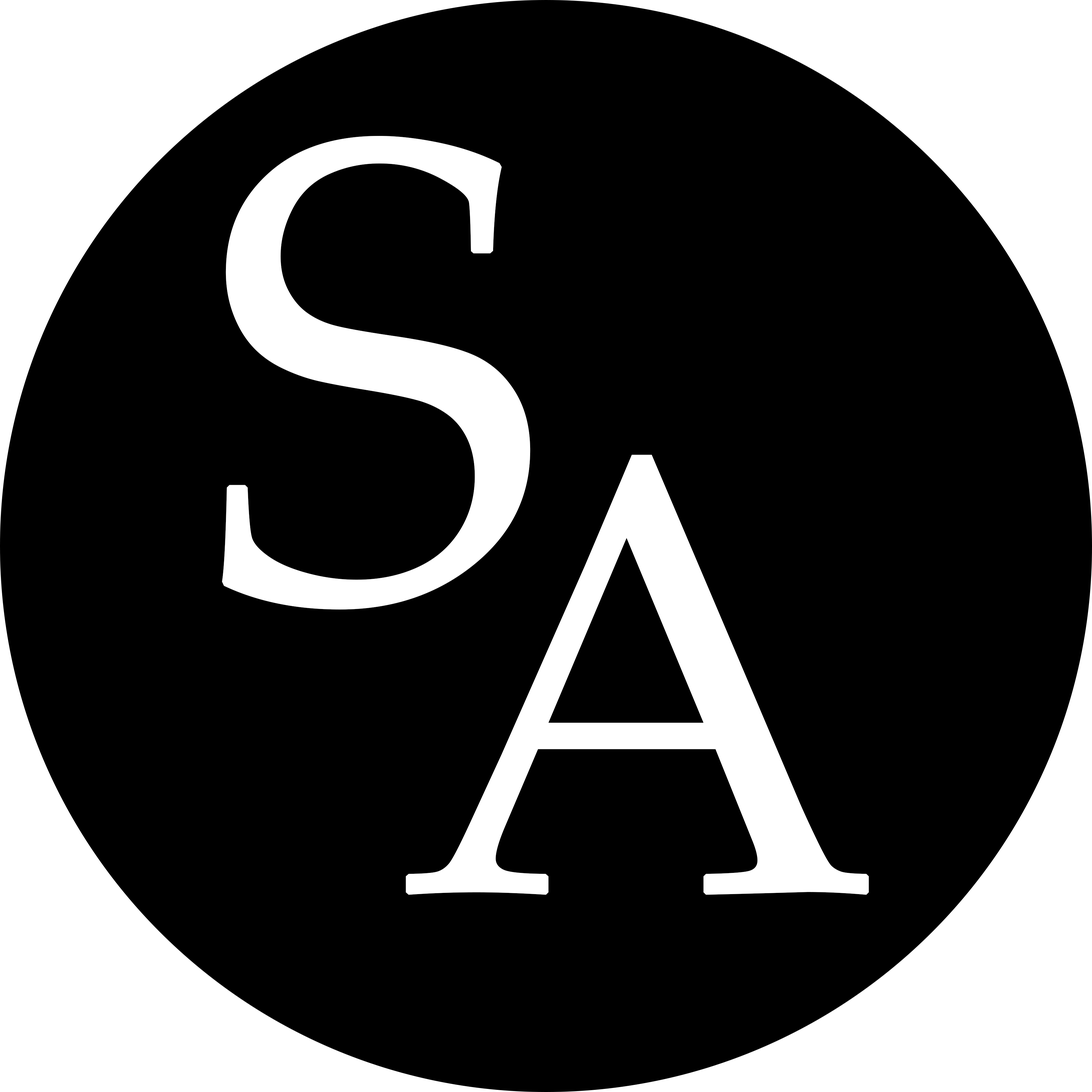
<style>
.page{position:relative;width:1092px;height:1092px;background:#000000}
.page>*{position:absolute;margin:0}
.t1{font:655.2px "PalatinoLinotype-Roman";color:#ffffff}
.t2{font:627.9px "PalatinoLinotype-Roman";color:#ffffff}
</style>
<div class="page">
<p class="t1" style="left:222px;top:136px;width:308px;height:474px">S</p>
<p class="t2" style="left:406px;top:455px;width:463px;height:440px">A</p>
</div>
